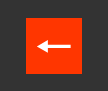
<style>
.page{position:relative;width:108px;height:91px;background:#333333}
.page>*{position:absolute;margin:0}
.t1{font:38.4px "ZenKakuGothicNew-Black";color:#ffffff}
</style>
<div class="page">
<p class="t1" style="left:36px;top:39px;width:35px;height:14px">←</p>
</div>
